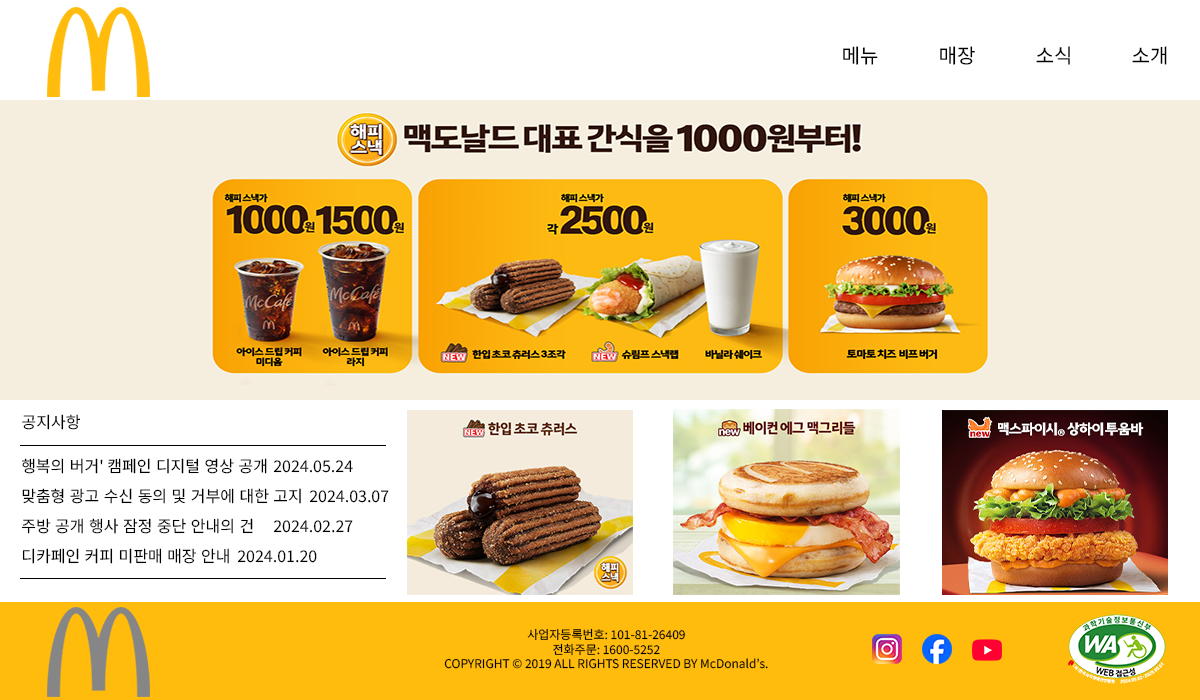
<style>
.page{position:relative;width:1200px;height:700px;background:#ffffff}
.page>*{position:absolute;margin:0}
.t1{font:20px "NotoSansKR-Regular";color:#000000}
.t2{font:16px "NotoSansKR-Regular";color:#000000}
.t3{font:16px/30px "NotoSansKR-Regular";color:#000000}
.t4{font:12px "NotoSansKR-Regular";color:#000000}
</style>
<div class="page">
<p class="t1" style="left:843px;top:46px;width:35px;height:19px">메뉴</p>
<p class="t1" style="left:940px;top:46px;width:35px;height:19px">매장</p>
<p class="t1" style="left:1036px;top:46px;width:34px;height:19px">소식</p>
<p class="t1" style="left:1132px;top:46px;width:35px;height:19px">소개</p>
<p class="t2" style="left:22px;top:414px;width:59px;height:16px">공지사항</p>
<p class="t3" style="left:21px;top:458px;width:368px;height:106px">행복의 버거' 캠페인 디지털 영상 공개 2024.05.24<br>맞춤형 광고 수신 동의 및 거부에 대한 고지 2024.03.07<br>주방 공개 행사 잠정 중단 안내의 건 2024.02.27<br>디카페인 커피 미판매 매장 안내 2024.01.20</p>
<p class="t4" style="left:444px;top:628px;width:324px;height:41px;text-align:center">사업자등록번호: 101-81-26409<br>전화주문: 1600-5252<br>COPYRIGHT © 2019 ALL RIGHTS RESERVED BY McDonald's.</p>
</div>
